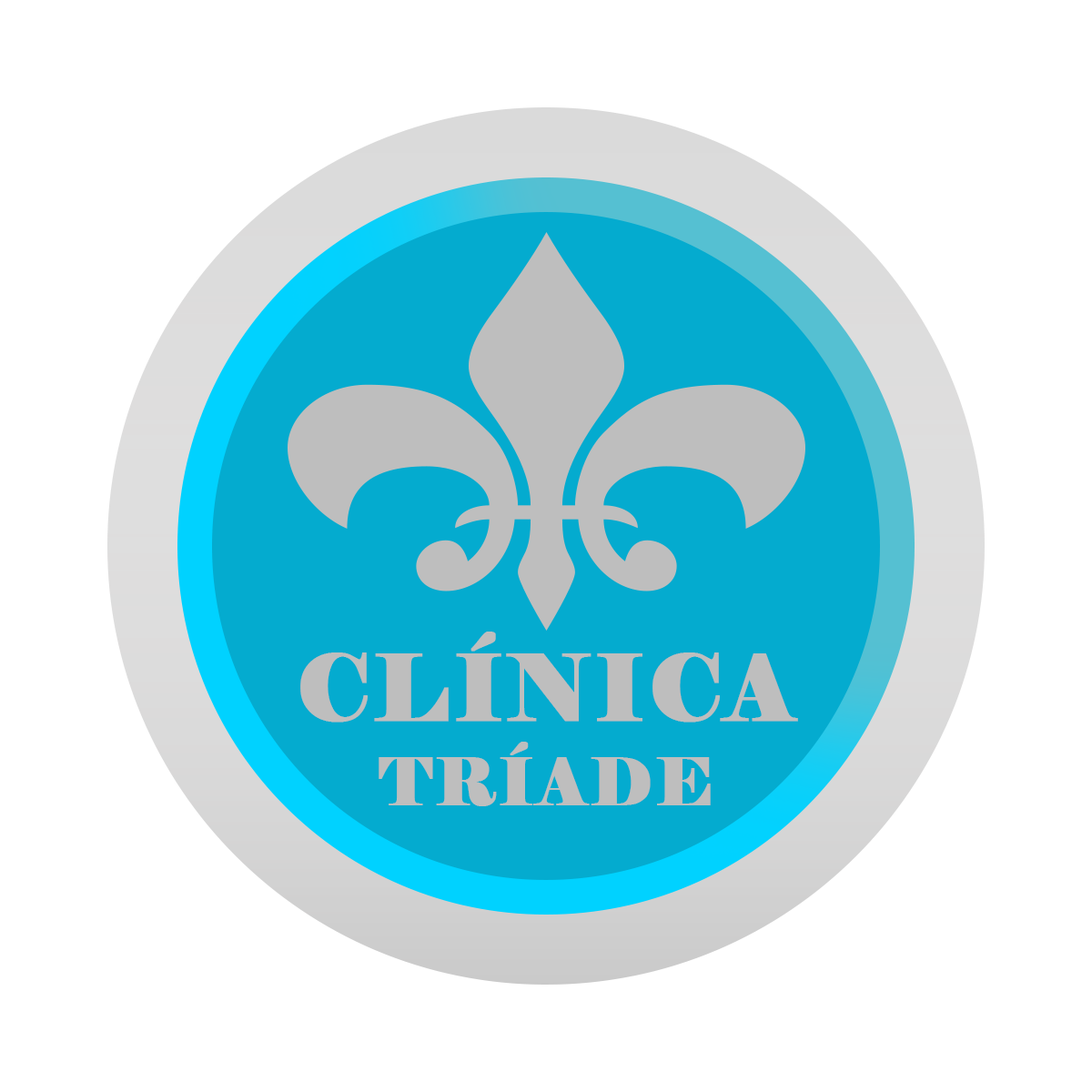
<style>
.page{position:relative;width:1092px;height:1092px;background:#ffffff}
.page>*{position:absolute;margin:0}
.t1{font:91px "Elephant-Regular";letter-spacing:0.03em;color:#bebebe;text-transform:uppercase;font-weight:bold}
.t2{font:65.5px "Elephant-Regular";letter-spacing:0.03em;color:#bebebe;text-transform:uppercase;font-weight:bold}
</style>
<div class="page">
<p class="t1" style="left:300px;top:632px;width:498px;height:91px">Clínica</p>
<p class="t2" style="left:379px;top:742px;width:332px;height:64px">Tríade</p>
</div>
